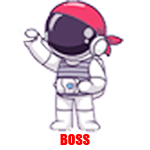
<style>
.page{position:relative;width:150px;height:150px;background:#ffffff}
.page>*{position:absolute;margin:0}
.t1{font:13.9px "Impact";color:#ff0000}
</style>
<div class="page">
<p class="t1" style="left:60px;top:134px;width:30px;height:11px">BOSS</p>
</div>
